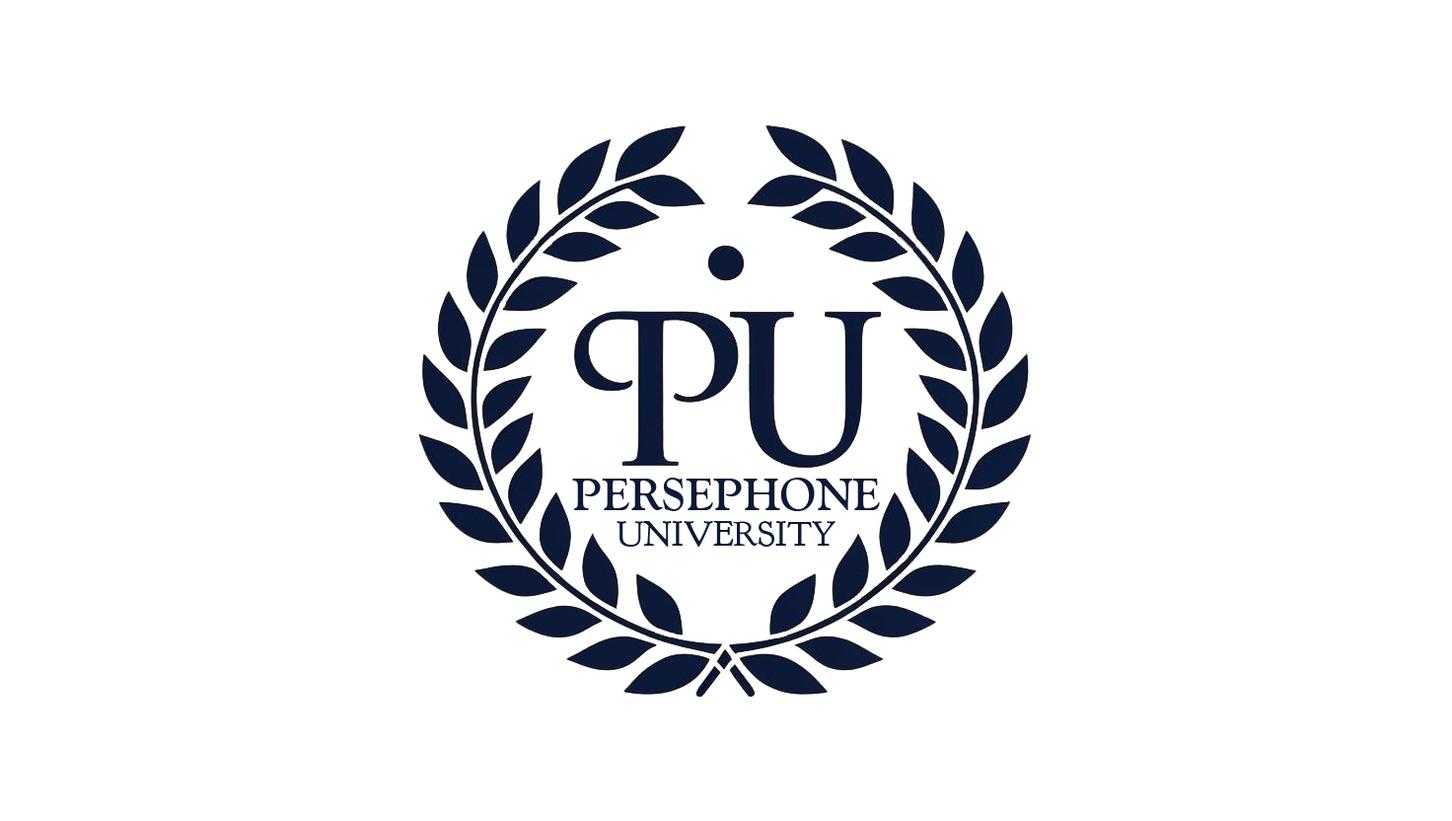
<style>
.page{position:relative;width:1452px;height:821px;background:#ffffff}
.page>*{position:absolute;margin:0}
.t1{font:47.4px "GoudyOldStyleT-Bold";color:#0c1a37}
.t2{font:35.5px "GoudyBookletter1911";color:#0c1a37}
</style>
<div class="page">
<p class="t1" style="left:572px;top:478px;width:308px;height:33px">PERSEPHONE</p>
<p class="t2" style="left:617px;top:521px;width:219px;height:26px">UNIVERSITY</p>
</div>
